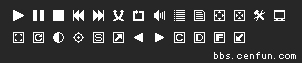
<style>
.page{position:relative;width:302px;height:63px;background:#272727}
.page>*{position:absolute;margin:0}
.t1{font:11px "SimHei";color:#ffffff}
</style>
<div class="page">
<p class="t1" style="left:214px;top:52px;width:82px;height:7px">bbs.cenfun.com</p>
</div>
